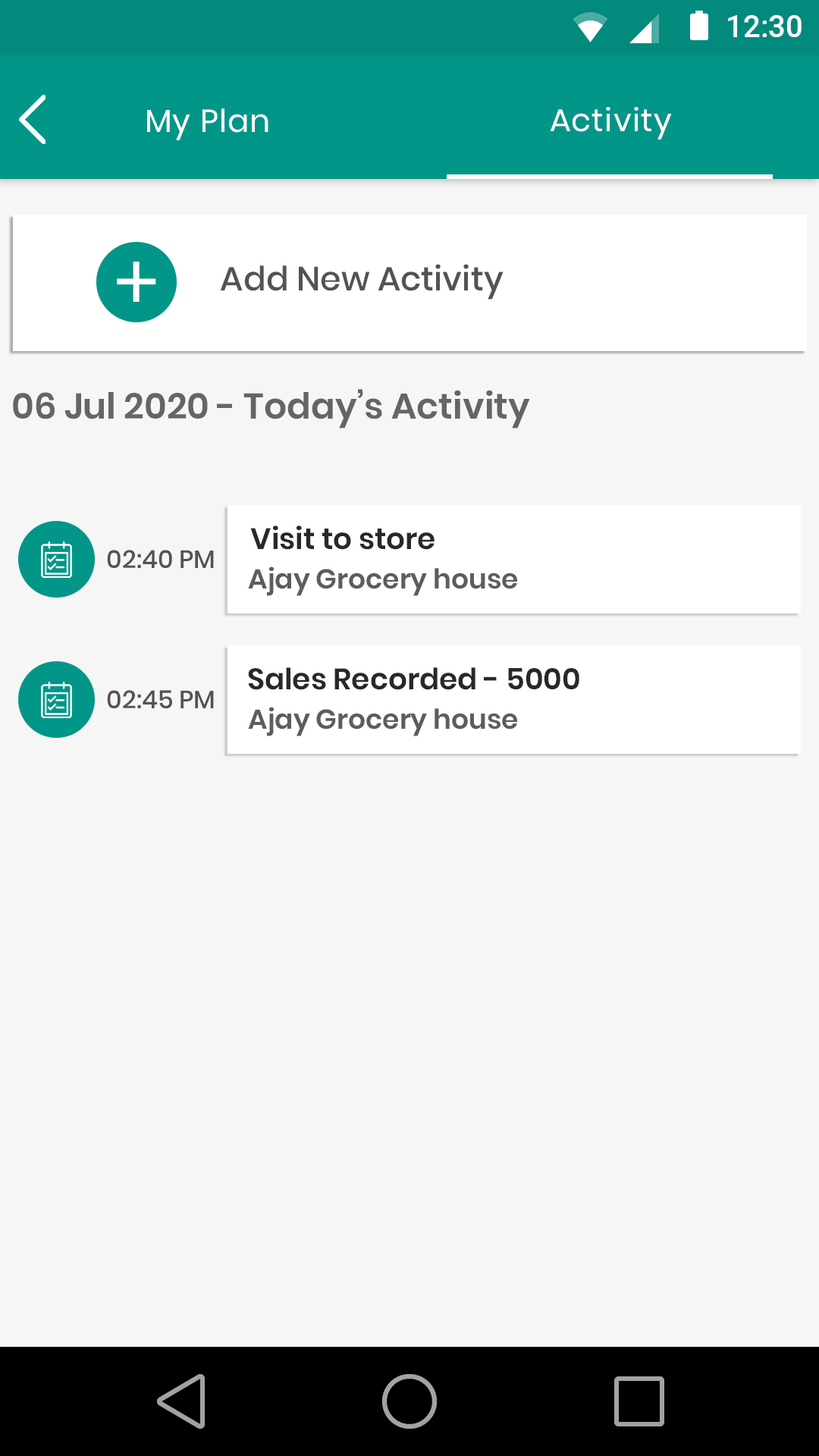
<style>
.page{position:relative;width:819px;height:1456px;background:#f6f6f6}
.page>*{position:absolute;margin:0}
.t1{font:31.2px "Roboto-Medium";color:#ffffff}
.t2{font:31.6px "Poppins-Regular";letter-spacing:0.025em;color:#ffffff}
.t3{font:31.6px "Poppins-Regular";letter-spacing:0.025em;color:#fffefe}
.t4{font:80.7px "Lato-Regular";color:#ffffff}
.t5{font:33.6px "Poppins-Medium";color:#535353}
.t6{font:35.7px "Poppins-SemiBold";color:#656565}
.t7{font:29.6px "Poppins-SemiBold";color:#282828}
.t8{font:25px "Poppins-Medium";color:#535353}
.t9{font:27.3px "Poppins-SemiBold";color:#5e5d5d}
</style>
<div class="page">
<p class="t1" style="left:728px;top:15px;width:74px;height:22px">12:30</p>
<p class="t2" style="left:147px;top:108px;width:121px;height:32px">My Plan</p>
<p class="t3" style="left:550px;top:107px;width:122px;height:33px">Activity</p>
<p class="t4" style="left:117px;top:262px;width:39px;height:40px">+</p>
<p class="t5" style="left:220px;top:264px;width:284px;height:36px">Add New Activity</p>
<p class="t6" style="left:13px;top:389px;width:517px;height:39px">06 Jul 2020 - Today’s Activity</p>
<p class="t7" style="left:250px;top:526px;width:185px;height:24px">Visit to store</p>
<p class="t8" style="left:107px;top:550px;width:107px;height:18px">02:40 PM</p>
<p class="t9" style="left:248px;top:566px;width:269px;height:30px">Ajay Grocery house</p>
<p class="t7" style="left:248px;top:667px;width:331px;height:23px">Sales Recorded - 5000</p>
<p class="t8" style="left:107px;top:690px;width:107px;height:19px">02:45 PM</p>
<p class="t9" style="left:248px;top:707px;width:269px;height:29px">Ajay Grocery house</p>
</div>
